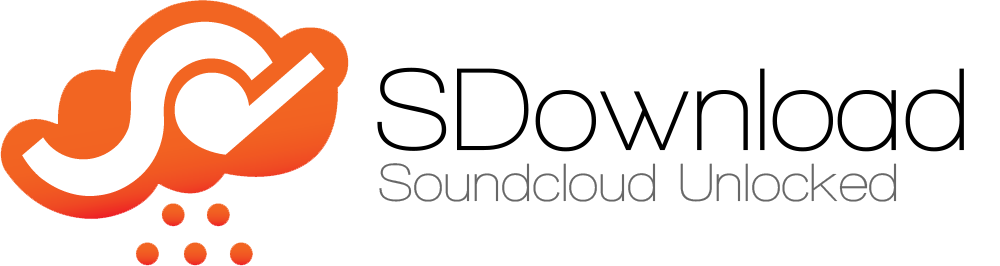
<style>
.page{position:relative;width:1000px;height:266px;background:#ffffff}
.page>*{position:absolute;margin:0}
.t1{font:120px "WalkwaySemiBold";color:#000000}
.t2{font:55px "WalkwaySemiBold";color:#686868}
</style>
<div class="page">
<p class="t1" style="left:377px;top:67px;width:587px;height:85px">SDownload</p>
<p class="t2" style="left:379px;top:163px;width:518px;height:39px">Soundcloud Unlocked</p>
</div>
